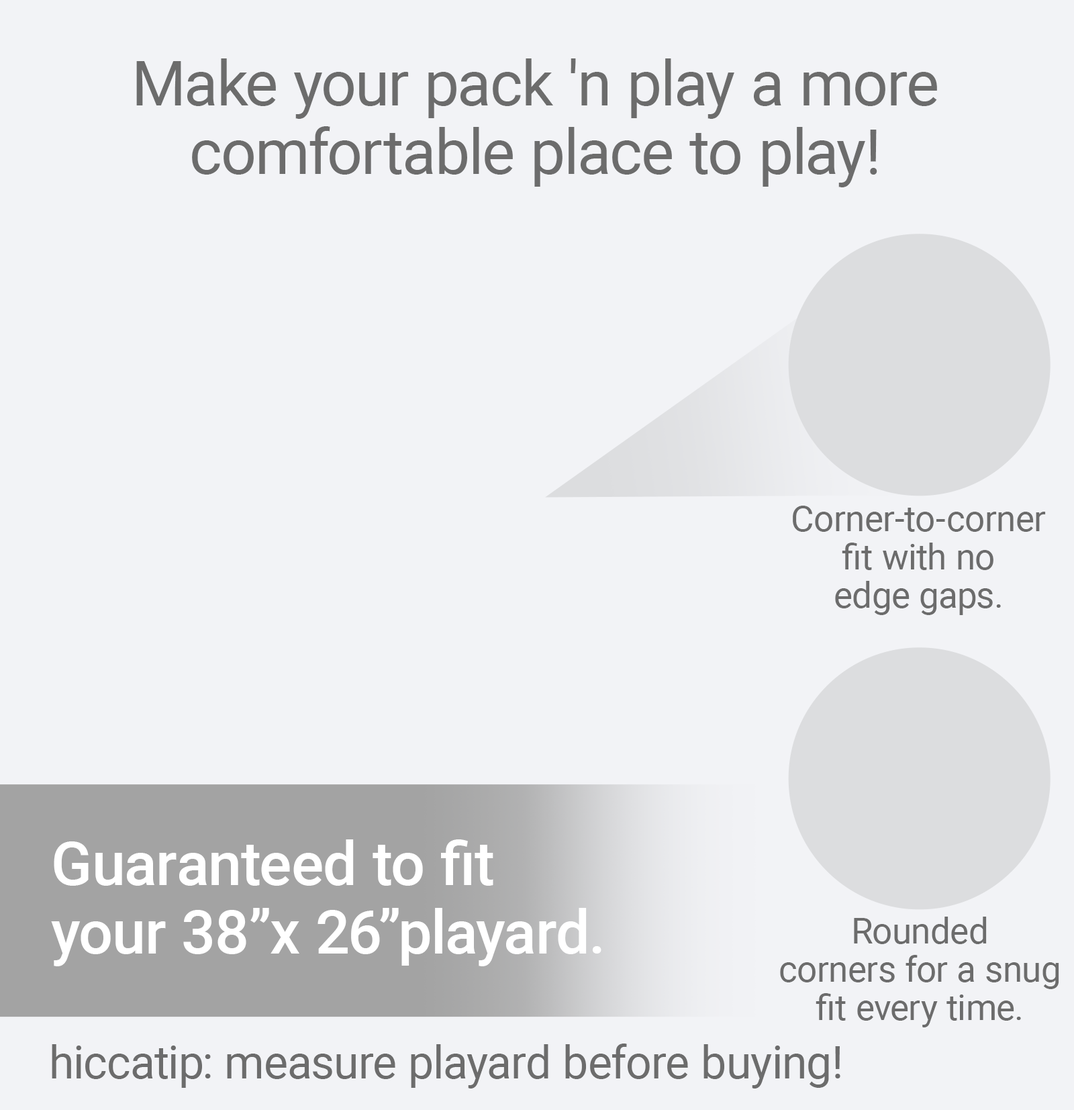
<style>
.page{position:relative;width:1074px;height:1110px;background:#f2f3f6}
.page>*{position:absolute;margin:0}
.t1{font:62.2px/68.1px "Roboto-Regular";color:#6c6c6c}
.t2{font:35.5px/38.5px "Roboto-Regular";color:#6c6c6c}
.t3{font:60.7px/68.1px "Roboto-Medium";color:#ffffff}
.t4{font:45.9px "Roboto-Regular";color:#6c6c6c}
</style>
<div class="page">
<p class="t1" style="left:136px;top:58px;width:801px;height:129px;text-align:center">Make your pack 'n play a more<br>comfortable place to play!</p>
<p class="t2" style="left:793px;top:506px;width:253px;height:109px;text-align:center">Corner-to-corner<br>fit with no<br>edge gaps.</p>
<p class="t3" style="left:51px;top:839px;width:551px;height:127px">Guaranteed to fit<br>your 38”x 26”playard.</p>
<p class="t2" style="left:780px;top:917px;width:280px;height:110px;text-align:center">Rounded<br>corners for a snug<br>fit every time.</p>
<p class="t4" style="left:52px;top:1043px;width:789px;height:45px">hiccatip: measure playard before buying!</p>
</div>
